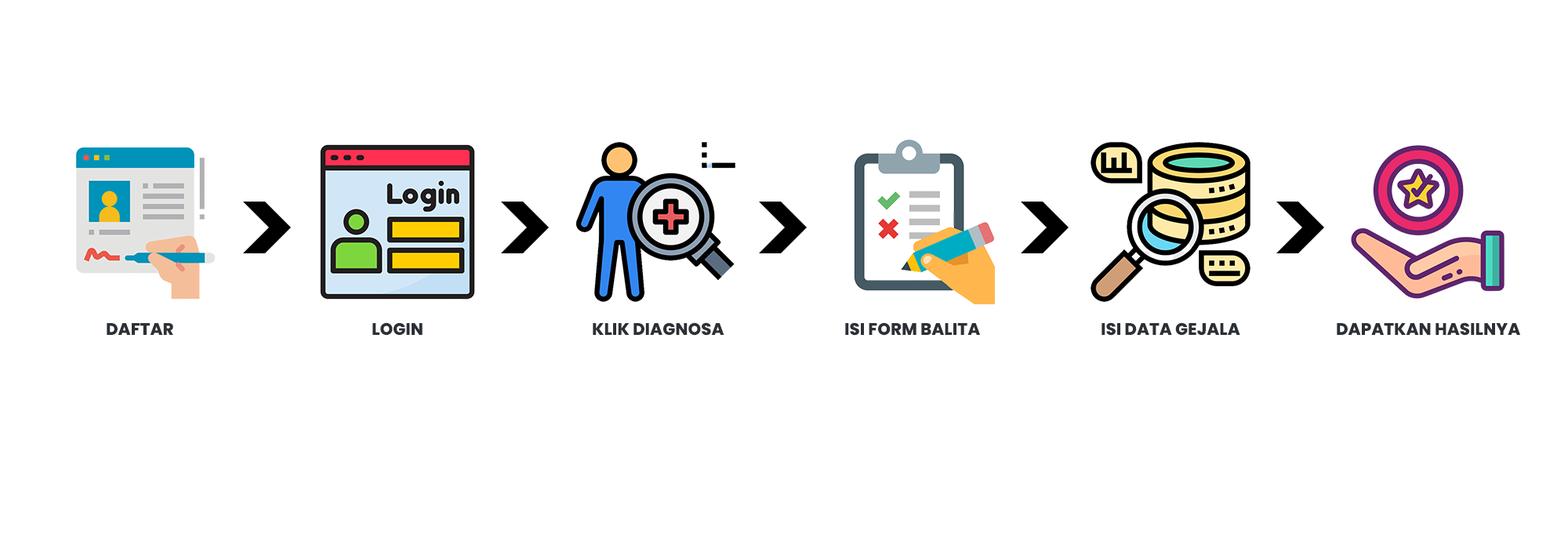
<style>
.page{position:relative;width:1568px;height:549px;background:#ffffff}
.page>*{position:absolute;margin:0}
.t1{font:16.7px "Poppins-ExtraBold";color:#2b3036}
</style>
<div class="page">
<p class="t1" style="left:107px;top:323px;width:66px;height:12px">DAFTAR</p>
<p class="t1" style="left:372px;top:322px;width:51px;height:14px">LOGIN</p>
<p class="t1" style="left:593px;top:322px;width:131px;height:14px">KLIK DIAGNOSA</p>
<p class="t1" style="left:845px;top:322px;width:135px;height:14px">ISI FORM BALITA</p>
<p class="t1" style="left:1102px;top:322px;width:138px;height:14px">ISI DATA GEJALA</p>
<p class="t1" style="left:1337px;top:322px;width:183px;height:14px">DAPATKAN HASILNYA</p>
</div>
